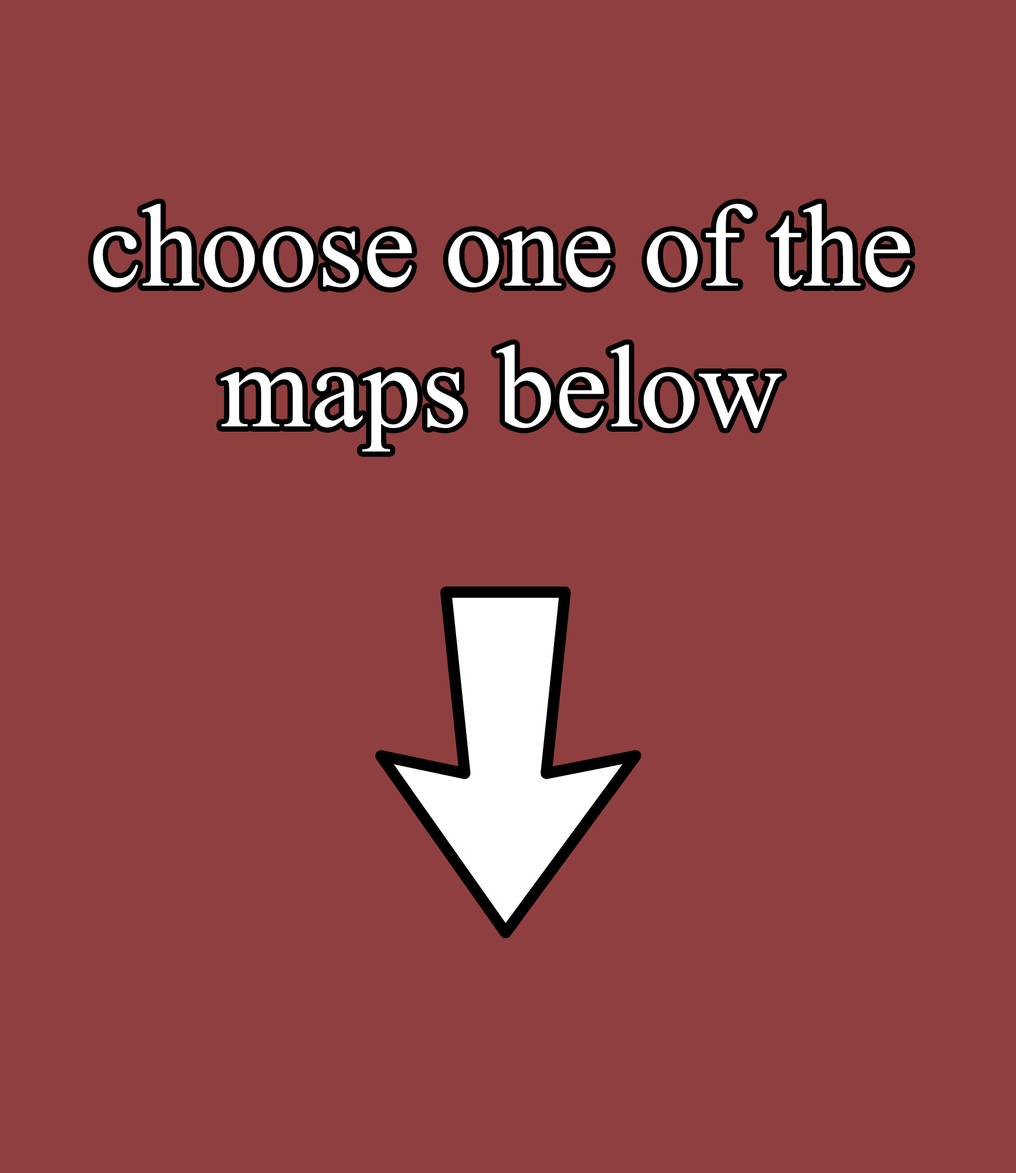
<style>
.page{position:relative;width:1016px;height:1173px;background:#8f3f3f}
.page>*{position:absolute;margin:0}
.t1{font:117.3px "TimesNewRomanPSMT";color:#ffffff}
</style>
<div class="page">
<p class="t1" style="left:93px;top:204px;width:818px;height:248px;text-align:center">choose one of the maps below</p>
</div>
